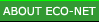
<style>
.page{position:relative;width:99px;height:22px;background:#339933}
.page>*{position:absolute;margin:0}
.t1{font:11px "Verdana";color:#ffffff}
</style>
<div class="page">
<p class="t1" style="left:3px;top:6px;width:93px;height:10px">ABOUT ECO-NET</p>
</div>
